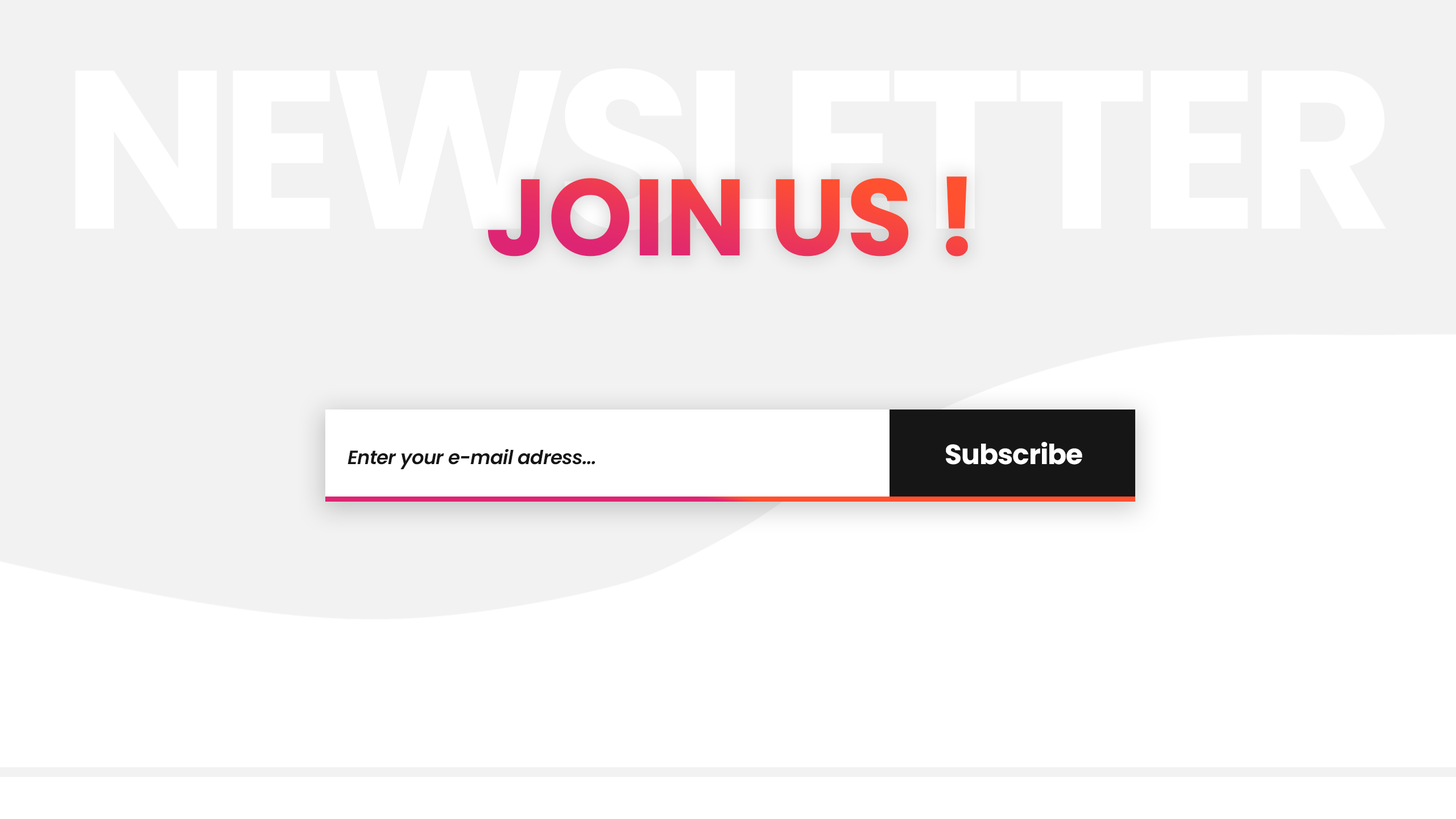
<style>
.page{position:relative;width:1456px;height:819px;background:#ffffff}
.page>*{position:absolute;margin:0}
.t1{font:225.1px "Poppins-Bold";letter-spacing:-0.05em;color:#ffffff}
.t2{font:225.1px "Poppins-Bold";letter-spacing:-0.03em;color:#ffffff}
.t3{font:108.4px "Poppins-Bold"}
.t4{font:19.3px "Poppins-SemiBoldItalic";letter-spacing:-0.02em;color:#161616}
.t5{font:27.7px "Poppins-Bold";letter-spacing:-0.02em;color:#ffffff}
</style>
<div class="page">
<p class="t1" style="left:75px;top:68px;width:1311px;height:162px">NEWSLE<span class="t2">T</span>TER</p>
<p class="t3" style="left:487px;top:176px;width:481px;height:81px">JOIN US !</p>
<p class="t4" style="left:348px;top:449px;width:247px;height:20px">Enter your e-mail adress...</p>
<p class="t5" style="left:946px;top:442px;width:136px;height:23px">Subscribe</p>
</div>
